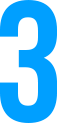
<style>
.page{position:relative;width:57px;height:123px;background:#009fff}
.page>*{position:absolute;margin:0}
.t1{font:173px "BebasNeueBold";color:#009fff}
</style>
<div class="page">
<p class="t1" style="left:0px;top:0px;width:57px;height:123px">3</p>
</div>
